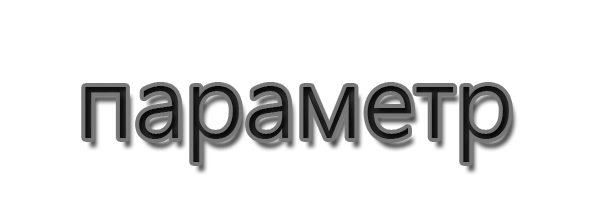
<style>
.page{position:relative;width:600px;height:200px;background:#ffffff}
.page>*{position:absolute;margin:0}
.t1{font:100px "MalgunGothic-Semilight";color:#151515}
</style>
<div class="page">
<p class="t1" style="left:85px;top:86px;width:424px;height:76px">параметр</p>
</div>
